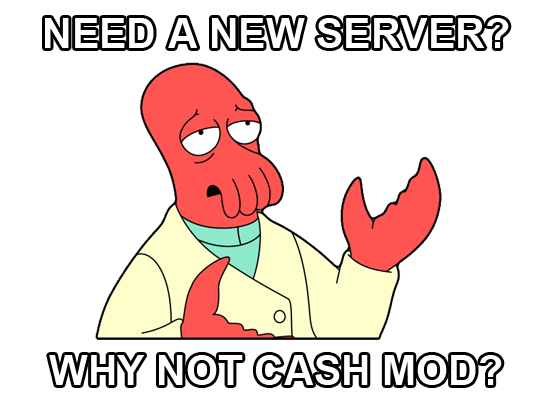
<style>
.page{position:relative;width:548px;height:397px;background:#ffffff}
.page>*{position:absolute;margin:0}
.t1{font:41.1px "Arial-BoldMT";color:#ffffff;text-transform:uppercase}
</style>
<div class="page">
<p class="t1" style="left:45px;top:18px;width:464px;height:30px">Need a new server?</p>
<p class="t1" style="left:49px;top:355px;width:453px;height:30px">Why not cash mod?</p>
</div>
